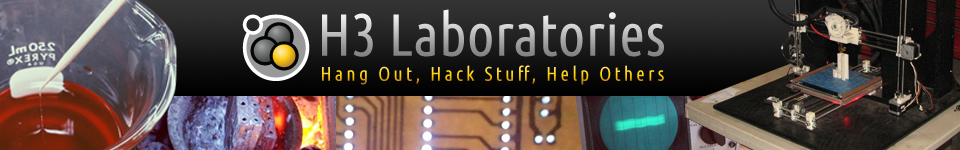
<style>
.page{position:relative;width:960px;height:150px}
.page>*{position:absolute;margin:0}
.t1{font:59.6px "UbuntuCondensed-Regular"}
.t2{font:19.9px "UbuntuCondensed-Regular";letter-spacing:0.153em}
</style>
<div class="page">
<p class="t1" style="left:322px;top:9px;width:342px;height:48px">H3 Laboratories</p>
<p class="t2" style="left:322px;top:65px;width:342px;height:20px">Hang Out, Hack Stuff, Help Others</p>
</div>
